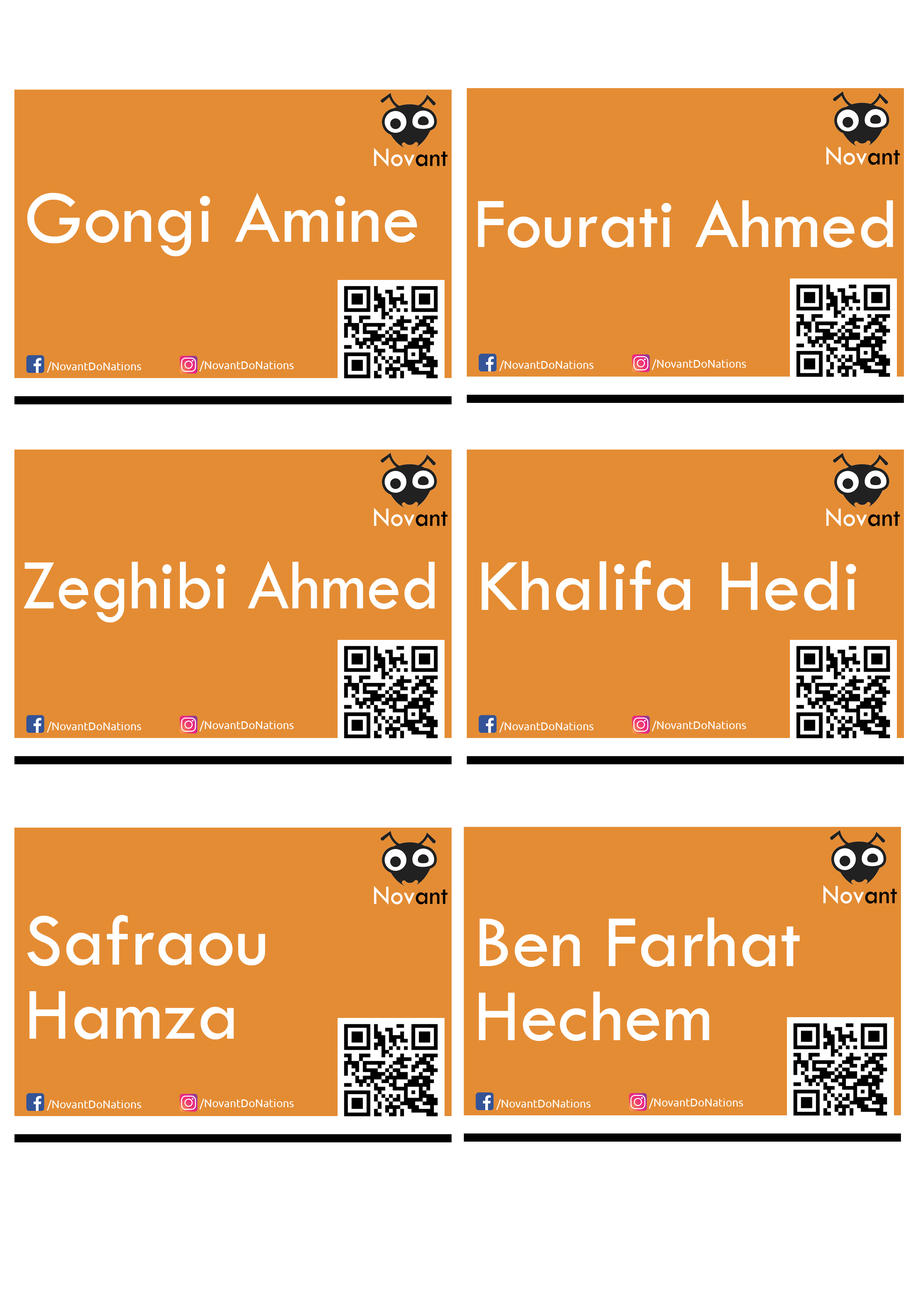
<style>
.page{position:relative;width:918px;height:1299px;background:#e48c34}
.page>*{position:absolute;margin:0}
.t1{font:76.4px "TwCenMT-Regular";color:#ffffff}
.t2{font:73.6px "TwCenMT-Regular";color:#ffffff}
.t3{font:11.1px "Ubuntu";color:#ffffff}
.t4{font:73.6px "TwCenMT-Regular";color:#ffffff;scale:0.94 1}
.t5{font:76.4px/74px "TwCenMT-Regular";color:#ffffff}
</style>
<div class="page">
<p class="t1" style="left:27px;top:193px;width:390px;height:63px">Gongi Amine</p>
<p class="t2" style="left:478px;top:199px;width:415px;height:49px">Fourati Ahmed</p>
<p class="t3" style="left:47px;top:362px;width:94px;height:10px">/NovantDoNations</p>
<p class="t3" style="left:199px;top:361px;width:95px;height:10px">/NovantDoNations</p>
<p class="t3" style="left:499px;top:360px;width:95px;height:11px">/NovantDoNations</p>
<p class="t3" style="left:652px;top:359px;width:94px;height:11px">/NovantDoNations</p>
<p class="t4" style="left:24px;top:561px;width:411px;height:61px">Zeghibi Ahmed</p>
<p class="t1" style="left:482px;top:560px;width:374px;height:50px">Khalifa Hedi</p>
<p class="t3" style="left:47px;top:722px;width:94px;height:10px">/NovantDoNations</p>
<p class="t3" style="left:199px;top:720px;width:95px;height:11px">/NovantDoNations</p>
<p class="t3" style="left:499px;top:722px;width:95px;height:10px">/NovantDoNations</p>
<p class="t3" style="left:652px;top:720px;width:94px;height:11px">/NovantDoNations</p>
<p class="t1" style="left:27px;top:914px;width:238px;height:125px">Safraou Hamza</p>
<p class="t5" style="left:479px;top:917px;width:321px;height:124px">Ben Farhat<br>Hechem</p>
<p class="t3" style="left:649px;top:1098px;width:94px;height:10px">/NovantDoNations</p>
<p class="t3" style="left:47px;top:1100px;width:94px;height:10px">/NovantDoNations</p>
<p class="t3" style="left:199px;top:1098px;width:95px;height:11px">/NovantDoNations</p>
<p class="t3" style="left:496px;top:1099px;width:95px;height:11px">/NovantDoNations</p>
</div>
